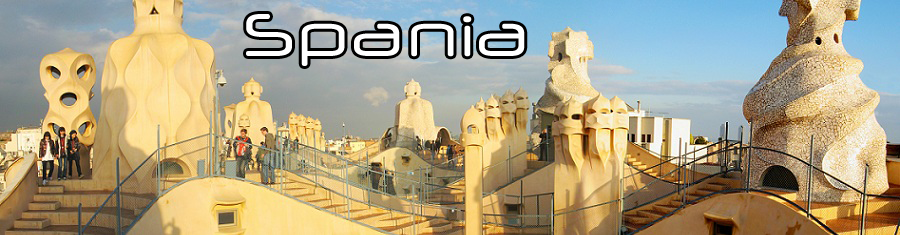
<style>
.page{position:relative;width:900px;height:235px}
.page>*{position:absolute;margin:0}
.t1{font:60px "NeuropolXFree";color:#ffffff}
</style>
<div class="page">
<p class="t1" style="left:246px;top:14px;width:279px;height:52px">Spania</p>
</div>
